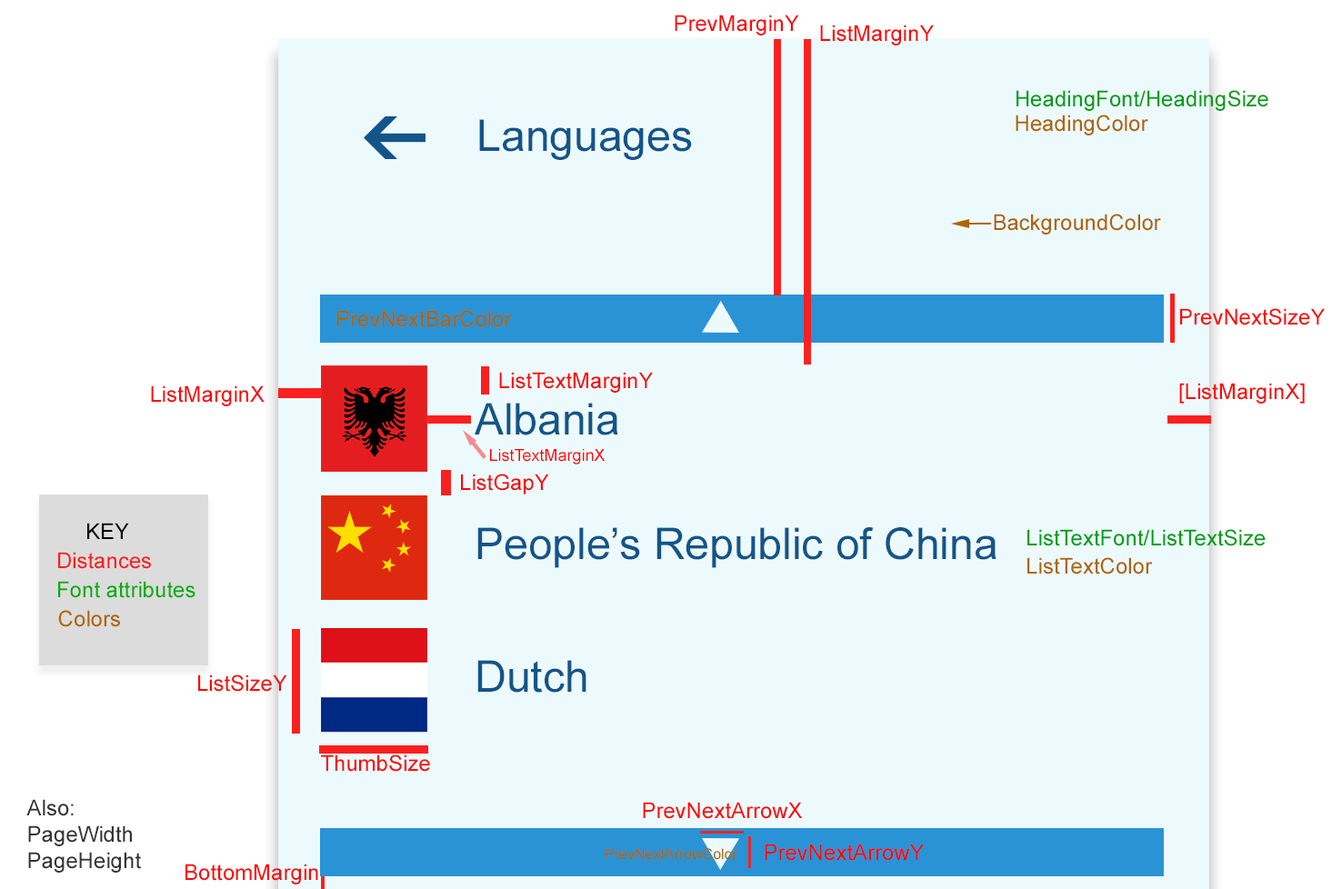
<style>
.page{position:relative;width:1342px;height:889px;background:#edfafd}
.page>*{position:absolute;margin:0}
.t1{font:21.8px "ArialMT";color:#fc0707}
.t2{font:21.8px "ArialMT";color:#039d18}
.t3{font:43.6px "ArialMT";color:#135589}
.t4{font:21.8px "ArialMT";color:#ae6505}
.t5{font:16.4px "ArialMT";color:#fc0707}
.t6{font:21.8px "ArialMT";color:#000000}
.t7{font:21.8px "ArialMT";color:#fa2020}
.t8{font:21.8px "ArialMT";color:#05ad0e}
.t9{font:21.8px "ArialMT";color:#343434}
.t10{font:14.5px "ArialMT";color:#ae6505}
</style>
<div class="page">
<p class="t1" style="left:674px;top:15px;width:125px;height:20px">PrevMarginY</p>
<p class="t1" style="left:820px;top:25px;width:113px;height:20px">ListMarginY</p>
<p class="t2" style="left:1016px;top:90px;width:252px;height:21px">HeadingFont/HeadingSize</p>
<p class="t3" style="left:479px;top:119px;width:213px;height:41px">Languages</p>
<p class="t4" style="left:1015px;top:115px;width:133px;height:20px">HeadingColor</p>
<p class="t4" style="left:993px;top:214px;width:168px;height:20px">BackgroundColor</p>
<p class="t4" style="left:337px;top:310px;width:175px;height:17px">PrevNextBarColor</p>
<p class="t1" style="left:1180px;top:308px;width:144px;height:17px">PrevNextSizeY</p>
<p class="t1" style="left:499px;top:372px;width:154px;height:21px">ListTextMarginY</p>
<p class="t1" style="left:151px;top:385px;width:113px;height:21px">ListMarginX</p>
<p class="t1" style="left:1179px;top:383px;width:125px;height:21px">[ListMarginX]</p>
<p class="t3" style="left:474px;top:403px;width:144px;height:32px">Albania</p>
<p class="t5" style="left:490px;top:449px;width:115px;height:15px">ListTextMarginX</p>
<p class="t1" style="left:461px;top:474px;width:88px;height:20px">ListGapY</p>
<p class="t6" style="left:87px;top:523px;width:42px;height:16px">KEY</p>
<p class="t3" style="left:477px;top:527px;width:519px;height:41px">People’s Republic of China</p>
<p class="t2" style="left:1027px;top:529px;width:238px;height:17px">ListTextFont/ListTextSize</p>
<p class="t7" style="left:58px;top:552px;width:93px;height:17px">Distances</p>
<p class="t4" style="left:1027px;top:557px;width:125px;height:17px">ListTextColor</p>
<p class="t8" style="left:58px;top:581px;width:137px;height:17px">Font attributes</p>
<p class="t4" style="left:58px;top:610px;width:62px;height:17px">Colors</p>
<p class="t3" style="left:477px;top:660px;width:109px;height:33px">Dutch</p>
<p class="t1" style="left:198px;top:674px;width:89px;height:18px">ListSizeY</p>
<p class="t1" style="left:321px;top:754px;width:109px;height:18px">ThumbSize</p>
<p class="t9" style="left:26px;top:799px;width:115px;height:74px">Also:<br>PageWidth<br>PageHeight</p>
<p class="t1" style="left:643px;top:802px;width:160px;height:17px">PrevNextArrowX</p>
<p class="t1" style="left:764px;top:843px;width:159px;height:18px">PrevNextArrowY</p>
<p class="t10" style="left:605px;top:848px;width:132px;height:12px">PrevNextArrowColor</p>
<p class="t1" style="left:185px;top:863px;width:133px;height:21px">BottomMargin</p>
</div>
